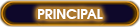
<style>
.page{position:relative;width:140px;height:27px}
.page>*{position:absolute;margin:0}
.t1{font:14.7px "AvantGardeITCTTDemi";color:#ffffff}
</style>
<div class="page">
<p class="t1" style="left:38px;top:9px;width:65px;height:10px">PRINCIPAL</p>
</div>
